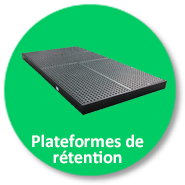
<style>
.page{position:relative;width:185px;height:185px;background:#00cc66}
.page>*{position:absolute;margin:0}
.t1{font:18px/16px "Calibri-Bold";color:#ffffff}
</style>
<div class="page">
<p class="t1" style="left:32px;top:134px;width:112px;height:30px;text-align:center">Plateformes de<br>rétention</p>
</div>
